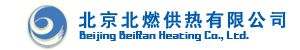
<style>
.page{position:relative;width:300px;height:50px;background:#ffffff}
.page>*{position:absolute;margin:0}
.t1{font:18px "HeitiCSEG-Medium-GB";letter-spacing:0.15em;color:#005bac;font-weight:bold}
.t2{font:9.7px "BMslyA10";color:#005bac}
</style>
<div class="page">
<p class="t1" style="left:78px;top:11px;width:208px;height:18px">北京北燃供热有限公司</p>
<p class="t2" style="left:79px;top:31px;width:170px;height:10px">Beijing BeiRan Heating Co., Ltd.</p>
</div>
